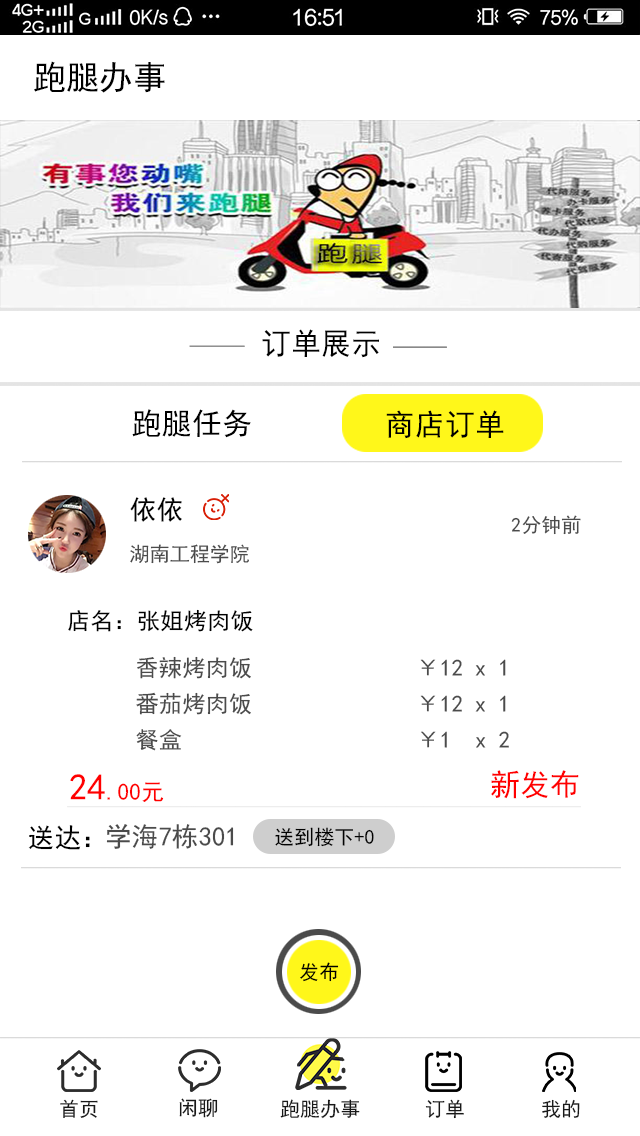
<style>
.page{position:relative;width:640px;height:1136px;background:#ffffff}
.page>*{position:absolute;margin:0}
.t1{font:33.3px "SimHei";letter-spacing:0.002em;color:#000000}
.t2{font:30px "SimHei";letter-spacing:0.002em;color:#010101}
.t3{font:30px "SimHei";letter-spacing:0.002em;color:#000000}
.t4{font:26.7px "SimHei";letter-spacing:0.002em;color:#010101}
.t5{font:12px "SimHei";letter-spacing:0.002em;color:#4b4b4b}
.t6{font:20px "SimHei";letter-spacing:0.002em;color:#4b4b4b}
.t7{font:23.3px "SimHei";letter-spacing:0.002em;color:#010101}
.t8{font:23.3px "SimHei";letter-spacing:0.002em;color:#4b4b4b}
.t9{font:23.3px "SimHei";letter-spacing:0.002em;color:#ff0000}
.t10{font:36.7px "SimHei";letter-spacing:0.002em;color:#ff0000}
.t11{font:30px "SimHei";letter-spacing:0.002em;color:#ff0000}
.t12{font:26.7px "SimHei";letter-spacing:0.002em;color:#000000}
.t13{font:26.7px "SimHei";letter-spacing:0.002em;color:#4b4b4b}
.t14{font:20px "SimHei";letter-spacing:0.002em;color:#010101}
.t15{font:12px "SimHei";letter-spacing:0.002em;color:#000000}
.t16{font:12px "SimHei";letter-spacing:0.002em;color:#181818}
</style>
<div class="page">
<p class="t1" style="left:34px;top:61px;width:131px;height:32px">跑腿办事</p>
<p class="t2" style="left:262px;top:329px;width:117px;height:29px">订单展示</p>
<p class="t3" style="left:132px;top:409px;width:119px;height:29px">跑腿任务</p>
<p class="t3" style="left:386px;top:410px;width:118px;height:29px">商店订单</p>
<p class="t4" style="left:130px;top:497px;width:52px;height:25px">依依</p>
<p class="t5" style="left:511px;top:515px;width:70px;height:20px">2分钟前</p>
<p class="t6" style="left:130px;top:544px;width:119px;height:20px">湖南工程学院</p>
<p class="t7" style="left:68px;top:609px;width:185px;height:23px">店名：张姐烤肉饭</p>
<p class="t8" style="left:137px;top:656px;width:369px;height:23px">香辣烤肉饭              ￥12 x 1</p>
<p class="t8" style="left:136px;top:692px;width:370px;height:23px">番茄烤肉饭              ￥12 x 1</p>
<p class="t8" style="left:136px;top:729px;width:373px;height:22px">餐盒                    ￥1  x 2</p>
<p class="t9" style="left:70px;top:774px;width:94px;height:28px"><span class="t10">24</span>.00元</p>
<p class="t11" style="left:491px;top:770px;width:88px;height:29px">新发布</p>
<p class="t12" style="left:28px;top:825px;width:62px;height:25px">送达：</p>
<p class="t13" style="left:106px;top:824px;width:128px;height:25px">学海7栋301</p>
<p class="t14" style="left:275px;top:827px;width:99px;height:20px">送到楼下+0</p>
<p class="t15" style="left:300px;top:962px;width:39px;height:20px">发布</p>
<p class="t16" style="left:60px;top:1099px;width:38px;height:19px">首页</p>
<p class="t16" style="left:179px;top:1098px;width:39px;height:20px">闲聊</p>
<p class="t16" style="left:280px;top:1099px;width:80px;height:20px">跑腿办事</p>
<p class="t16" style="left:425px;top:1099px;width:39px;height:20px">订单</p>
<p class="t16" style="left:542px;top:1099px;width:38px;height:19px">我的</p>
</div>
